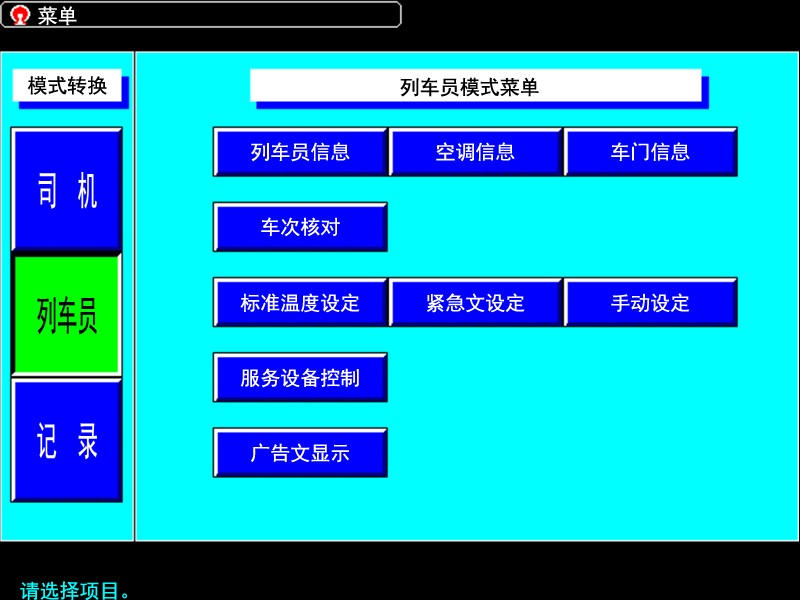
<style>
.page{position:relative;width:800px;height:600px;background:#00ffff}
.page>*{position:absolute;margin:0}
.t1{font:20px "SimHei";color:#ffffff}
.t2{font:20px "SimHei";color:#000000}
.t3{font:20px "SimHei";color:#00ffff}
</style>
<div class="page">
<p class="t1" style="left:38px;top:6px;width:39px;height:19px">菜单</p>
<p class="t2" style="left:27px;top:76px;width:80px;height:19px">模式转换</p>
<p class="t2" style="left:400px;top:77px;width:139px;height:20px">列车员模式菜单</p>
<p class="t1" style="left:251px;top:142px;width:99px;height:20px">列车员信息</p>
<p class="t1" style="left:436px;top:142px;width:79px;height:20px">空调信息</p>
<p class="t1" style="left:611px;top:142px;width:79px;height:19px">车门信息</p>
<p class="t1" style="left:261px;top:217px;width:79px;height:20px">车次核对</p>
<p class="t1" style="left:240px;top:293px;width:120px;height:20px">标准温度设定</p>
<p class="t1" style="left:427px;top:293px;width:98px;height:20px">紧急文设定</p>
<p class="t1" style="left:611px;top:293px;width:79px;height:20px">手动设定</p>
<p class="t1" style="left:240px;top:368px;width:119px;height:20px">服务设备控制</p>
<p class="t1" style="left:250px;top:443px;width:99px;height:20px">广告文显示</p>
<p class="t3" style="left:20px;top:581px;width:107px;height:20px">请选择项目。</p>
</div>
